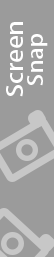
<style>
.page{position:relative;width:54px;height:257px;background:#9b9b9b}
.page>*{position:absolute;margin:0}
.t1{font:25.1px "AdobeHeitiStd-Regular";color:#ffffff;scale:0.88 1}
.t2{font:23.4px "AdobeHeitiStd-Regular";color:#ffffff;scale:0.87 1}
</style>
<div class="page">
<p class="t1" style="left:6px;top:22px;width:17px;height:75px;rotate:180deg">Screen</p>
<p class="t2" style="left:27px;top:34px;width:21px;height:52px;rotate:180deg">Snap</p>
</div>
